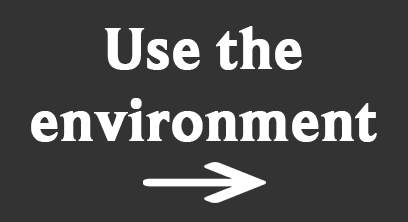
<style>
.page{position:relative;width:408px;height:222px;background:#333333}
.page>*{position:absolute;margin:0}
.t1{font:60px "BeaufortforLOL-Bold";color:#ffffff;font-weight:bold}
</style>
<div class="page">
<p class="t1" style="left:31px;top:26px;width:346px;height:116px;text-align:center">Use the<br>environment</p>
</div>
